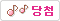
<style>
.page{position:relative;width:60px;height:21px;background:#ffffff}
.page>*{position:absolute;margin:0}
.t1{font:12px "morris9";color:#e42b8b;font-weight:bold}
</style>
<div class="page">
<p class="t1" style="left:32px;top:6px;width:21px;height:10px">당첨</p>
</div>
